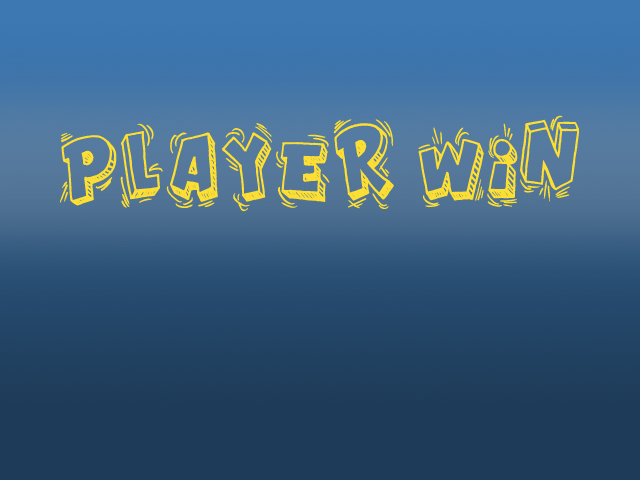
<style>
.page{position:relative;width:640px;height:480px}
.page>*{position:absolute;margin:0}
.t1{font:48px/36px "GoodMorning";letter-spacing:0.025em;color:#fdde32}
</style>
<div class="page">
<p class="t1" style="left:60px;top:115px;width:519px;height:97px;text-align:center">PLAYER WIN</p>
</div>
